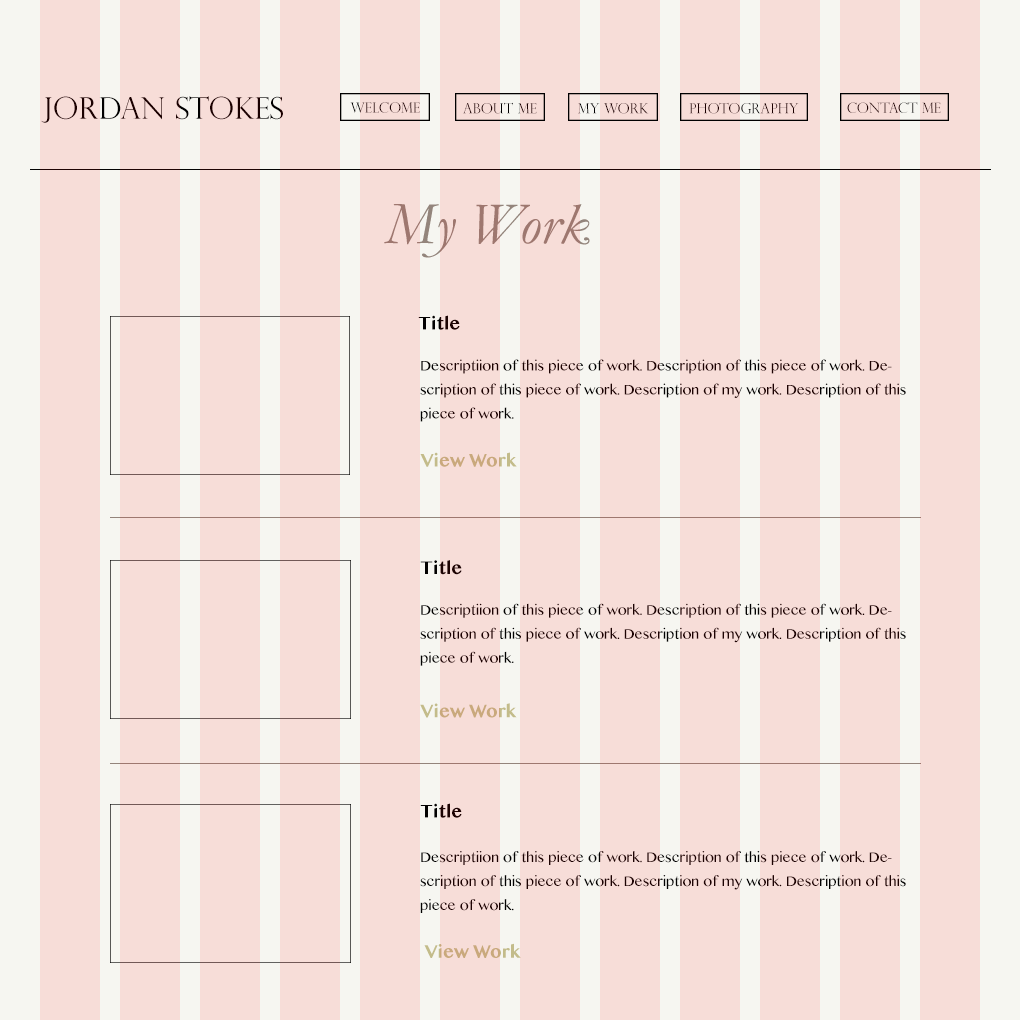
<style>
.page{position:relative;width:1020px;height:1020px;background:#f7ddd8}
.page>*{position:absolute;margin:0}
.t1{font:30px "PerpetuaTitlingMT-Light";color:#1a0000}
.t2{font:14px "PerpetuaTitlingMT-Light";color:#1a0000}
.t3{font:14px "PerpetuaTitlingMT-Light"}
.t4{font:18px "TamilMN-Bold"}
.t5{font:14px/24px "TamilMN";color:#1c0202}
.t6{font:18px "TamilMN-Bold";color:#c3bc8a}
</style>
<div class="page">
<p class="t1" style="left:41px;top:96px;width:242px;height:27px">Jordan Stokes</p>
<p class="t2" style="left:350px;top:102px;width:70px;height:11px">Welcome</p>
<p class="t3" style="left:463px;top:102px;width:74px;height:12px">About me</p>
<p class="t2" style="left:689px;top:102px;width:110px;height:12px">photography</p>
<p class="t2" style="left:847px;top:102px;width:94px;height:11px">contact me</p>
<p class="t3" style="left:578px;top:103px;width:71px;height:11px">My work</p>
<p class="t4" style="left:418px;top:315px;width:42px;height:15px">Title</p>
<p class="t5" style="left:420px;top:359px;width:486px;height:63px">Descriptiion of this piece of work. Description of this piece of work. Description of this piece of work. Description of my work. Description of this piece of work.</p>
<p class="t6" style="left:420px;top:452px;width:97px;height:15px">View Work</p>
<p class="t4" style="left:420px;top:560px;width:42px;height:15px">Title</p>
<p class="t5" style="left:420px;top:603px;width:486px;height:63px">Descriptiion of this piece of work. Description of this piece of work. Description of this piece of work. Description of my work. Description of this piece of work.</p>
<p class="t6" style="left:420px;top:703px;width:97px;height:15px">View Work</p>
<p class="t4" style="left:420px;top:803px;width:42px;height:15px">Title</p>
<p class="t5" style="left:420px;top:851px;width:486px;height:62px">Descriptiion of this piece of work. Description of this piece of work. Description of this piece of work. Description of my work. Description of this piece of work.</p>
<p class="t6" style="left:424px;top:943px;width:97px;height:15px">View Work</p>
</div>
